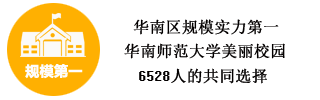
<style>
.page{position:relative;width:320px;height:100px;background:#ffffff}
.page>*{position:absolute;margin:0}
.t1{font:16px "System";color:#030000}
.t2{font:14px "MicrosoftYaHei-Bold";color:#fefdfd;text-transform:uppercase;font-weight:bold}
</style>
<div class="page">
<p class="t1" style="left:133px;top:19px;width:146px;height:16px">华南区规模实力第一</p>
<p class="t1" style="left:124px;top:43px;width:161px;height:16px">华南师范大学美丽校园</p>
<p class="t2" style="left:25px;top:64px;width:58px;height:15px">规模第一</p>
<p class="t1" style="left:139px;top:68px;width:128px;height:16px">6528人的共同选择</p>
</div>
